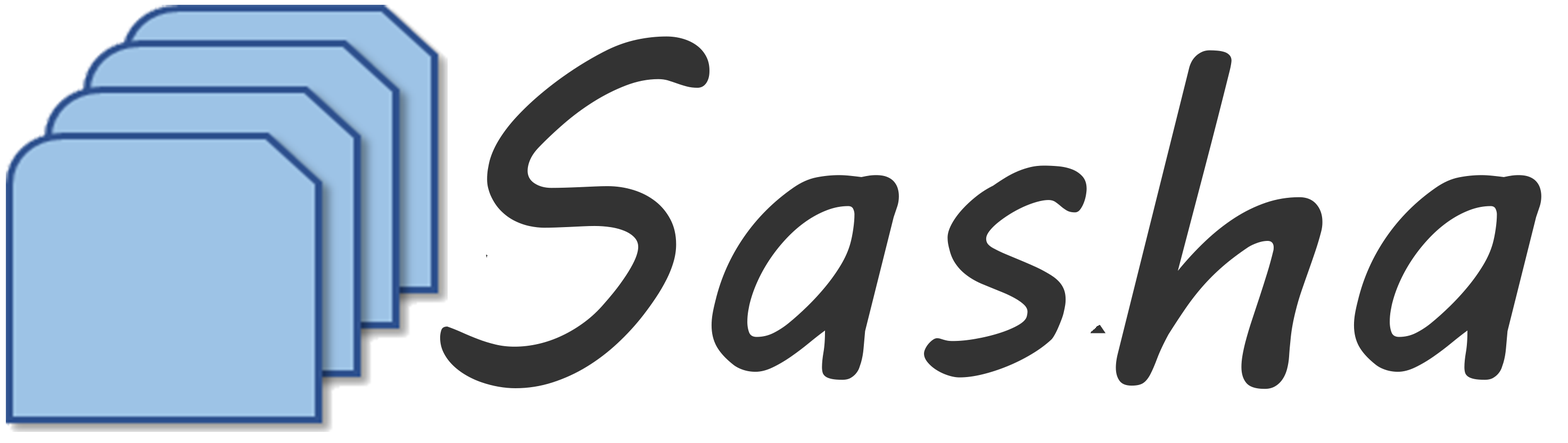
<style>
.page{position:relative;width:1568px;height:443px;background:#ffffff}
.page>*{position:absolute;margin:0}
.t1{font:443.5px "MVBoli";color:#333333}
</style>
<div class="page">
<p class="t1" style="left:440px;top:36px;width:1101px;height:354px">Sasha</p>
</div>
